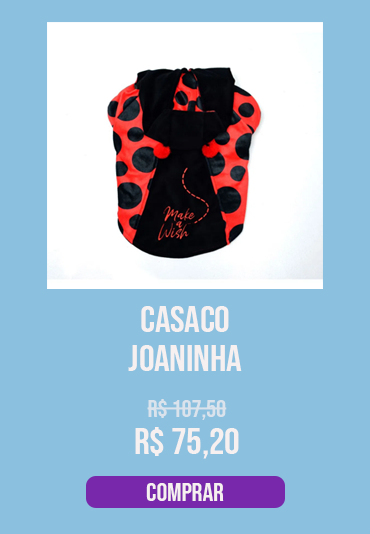
<style>
.page{position:relative;width:370px;height:534px;background:#8bc0df}
.page>*{position:absolute;margin:0}
.t1{font:36.8px "BebasNeue-Regular";letter-spacing:-0.005em;color:#f7f0f0;scale:1.06 1}
.t2{font:23.8px "BebasNeue-Regular";letter-spacing:-0.005em;color:#dae2eb;scale:1.06 1}
.t3{font:25.4px "BebasNeue-Regular";letter-spacing:-0.005em;color:#f7f0f0;scale:1.06 1}
</style>
<div class="page">
<p class="t1" style="left:141px;top:306px;width:88px;height:26px">casaco</p>
<p class="t1" style="left:128px;top:345px;width:114px;height:26px">joaninha</p>
<p class="t2" style="left:147px;top:399px;width:80px;height:21px">r$ 107,50</p>
<p class="t1" style="left:135px;top:427px;width:104px;height:32px">r$ 75,20</p>
<p class="t3" style="left:146px;top:483px;width:78px;height:18px">comprar</p>
</div>
